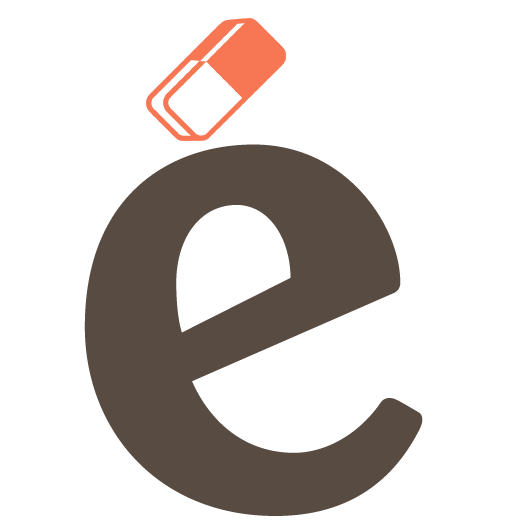
<style>
.page{position:relative;width:520px;height:520px;background:#ffffff}
.page>*{position:absolute;margin:0}
.t1{font:700px "YoungSerif-Regular";letter-spacing:0.075em;color:#584b42;font-weight:bold}
</style>
<div class="page">
<p class="t1" style="left:84px;top:144px;width:339px;height:372px">e</p>
</div>
